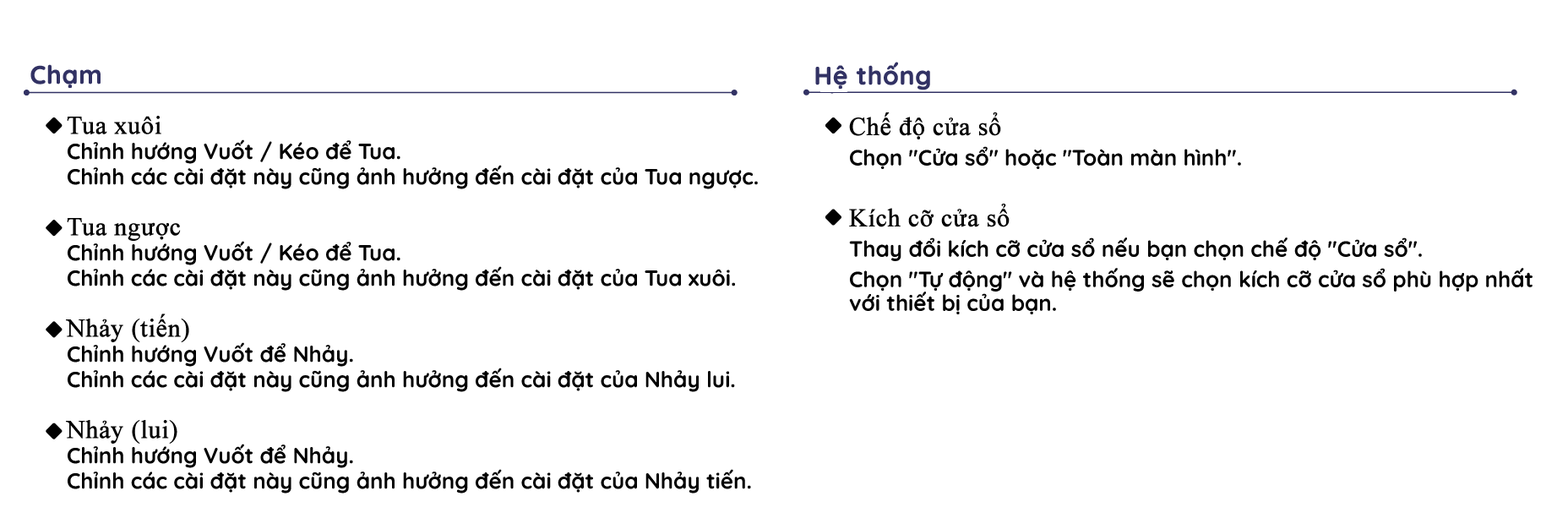
<style>
.page{position:relative;width:1568px;height:518px;background:#ffffff}
.page>*{position:absolute;margin:0}
.t1{font:25.3px "Quicksand-Bold";color:#323264;font-weight:bold}
.t2{font:22px/23.7px "Quicksand-Bold";color:#000000}
.t3{font:25.3px/23.7px "TimesNewRomanPSMT";color:#000000;font-weight:bold}
.t4{font:22px/18.6px "Quicksand-Bold";color:#000000}
.t5{font:25.3px/18.6px "TimesNewRomanPSMT";color:#000000;font-weight:bold}
</style>
<div class="page">
<p class="t1" style="left:30px;top:64px;width:71px;height:25px">Chạm</p>
<p class="t1" style="left:815px;top:62px;width:115px;height:28px">Hệ thống</p>
<p class="t2" style="left:849px;top:112px;width:684px;height:202px"><span class="t3">Chế độ cửa sổ<br></span>Chọn "Cửa sổ" hoặc "Toàn màn hình".<br><span class="t3"><br>Kích cỡ cửa sổ<br></span>Thay đổi kích cỡ cửa sổ nếu bạn chọn chế độ "Cửa sổ".<br>Chọn "Tự động" và hệ thống sẽ chọn kích cỡ cửa sổ phù hợp nhất với thiết bị của bạn.</p>
<p class="t4" style="left:66px;top:116px;width:692px;height:377px"><span class="t5">Tua xuôi <br></span>Chỉnh hướng Vuốt / Kéo để Tua.<br>Chỉnh các cài đặt này cũng ảnh hưởng đến cài đặt của Tua ngược.<br><br><span class="t5">Tua ngược <br></span>Chỉnh hướng Vuốt / Kéo để Tua.<br>Chỉnh các cài đặt này cũng ảnh hưởng đến cài đặt của Tua xuôi.<br><br><span class="t5">Nhảy (tiến)<br></span>Chỉnh hướng Vuốt để Nhảy.<br>Chỉnh các cài đặt này cũng ảnh hưởng đến cài đặt của Nhảy lui.<br><br><span class="t5">Nhảy (lui)<br></span>Chỉnh hướng Vuốt để Nhảy.<br>Chỉnh các cài đặt này cũng ảnh hưởng đến cài đặt của Nhảy tiến.</p>
</div>
